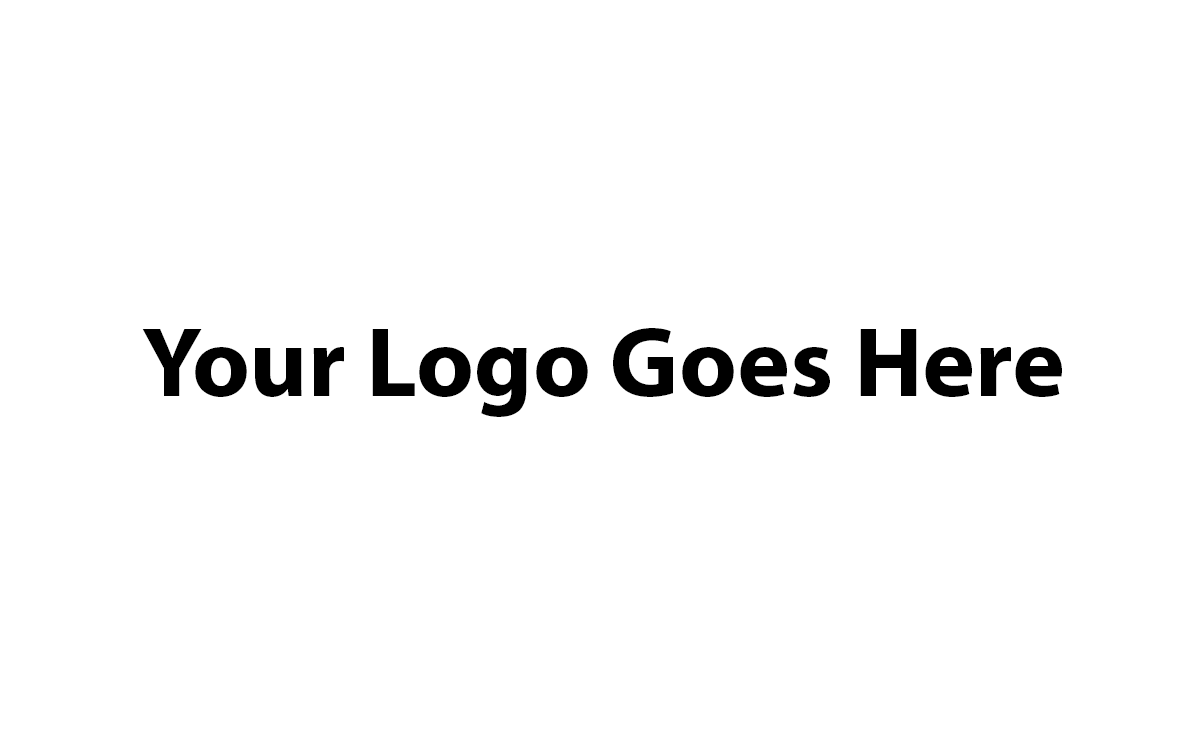
<style>
.page{position:relative;width:1200px;height:745px;background:#ffffff}
.page>*{position:absolute;margin:0}
.t1{font:100px "MyriadPro-Bold";color:#000000}
</style>
<div class="page">
<p class="t1" style="left:142px;top:328px;width:920px;height:89px">Your Logo Goes Here</p>
</div>
